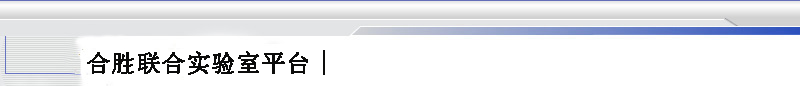
<style>
.page{position:relative;width:800px;height:86px;background:#ffffff}
.page>*{position:absolute;margin:0}
.t1{font:24px "SimSun";color:#0c0c0b;font-weight:bold}
</style>
<div class="page">
<p class="t1" style="left:87px;top:50px;width:238px;height:25px">合胜联合实验室平台|</p>
</div>
